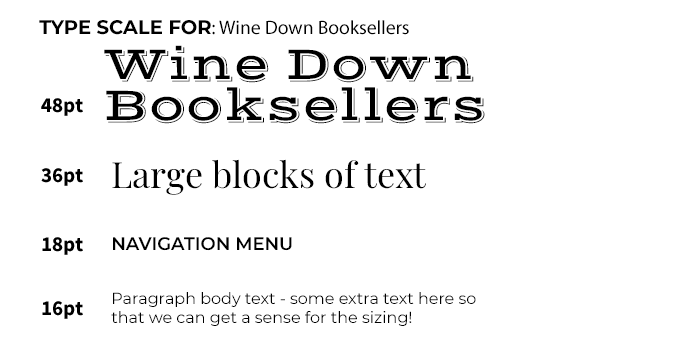
<style>
.page{position:relative;width:680px;height:356px;background:#ffffff}
.page>*{position:absolute;margin:0}
.t1{font:19.5px "MyriadPro-Regular";color:#000000}
.t2{font:19.5px "Montserrat-Bold";color:#000000;text-transform:uppercase}
.t3{font:48px "VastShadow-Regular";color:#000000}
.t4{font:21px "SourceSansPro-Bold";color:#000000}
.t5{font:36px "PlayfairDisplay-Regular";color:#000000}
.t6{font:18px "Montserrat-SemiBold";color:#000000}
.t7{font:16px/19.5px "Montserrat-Regular";color:#000000}
</style>
<div class="page">
<p class="t1" style="left:39px;top:20px;width:370px;height:15px"><span class="t2">TYPE SCALE for</span>: Wine Down Booksellers</p>
<p class="t3" style="left:104px;top:45px;width:370px;height:38px">Wine Down</p>
<p class="t3" style="left:106px;top:87px;width:379px;height:37px">Booksellers</p>
<p class="t4" style="left:41px;top:98px;width:42px;height:18px">48pt</p>
<p class="t5" style="left:112px;top:159px;width:314px;height:36px">Large blocks of text</p>
<p class="t4" style="left:41px;top:168px;width:42px;height:18px">36pt</p>
<p class="t4" style="left:42px;top:237px;width:41px;height:18px">18pt</p>
<p class="t6" style="left:113px;top:237px;width:179px;height:14px">NAVIGATION MENU</p>
<p class="t7" style="left:111px;top:292px;width:365px;height:34px">Paragraph body text - some extra text here so that we can get a sense for the sizing!</p>
<p class="t4" style="left:42px;top:301px;width:41px;height:18px">16pt</p>
</div>
